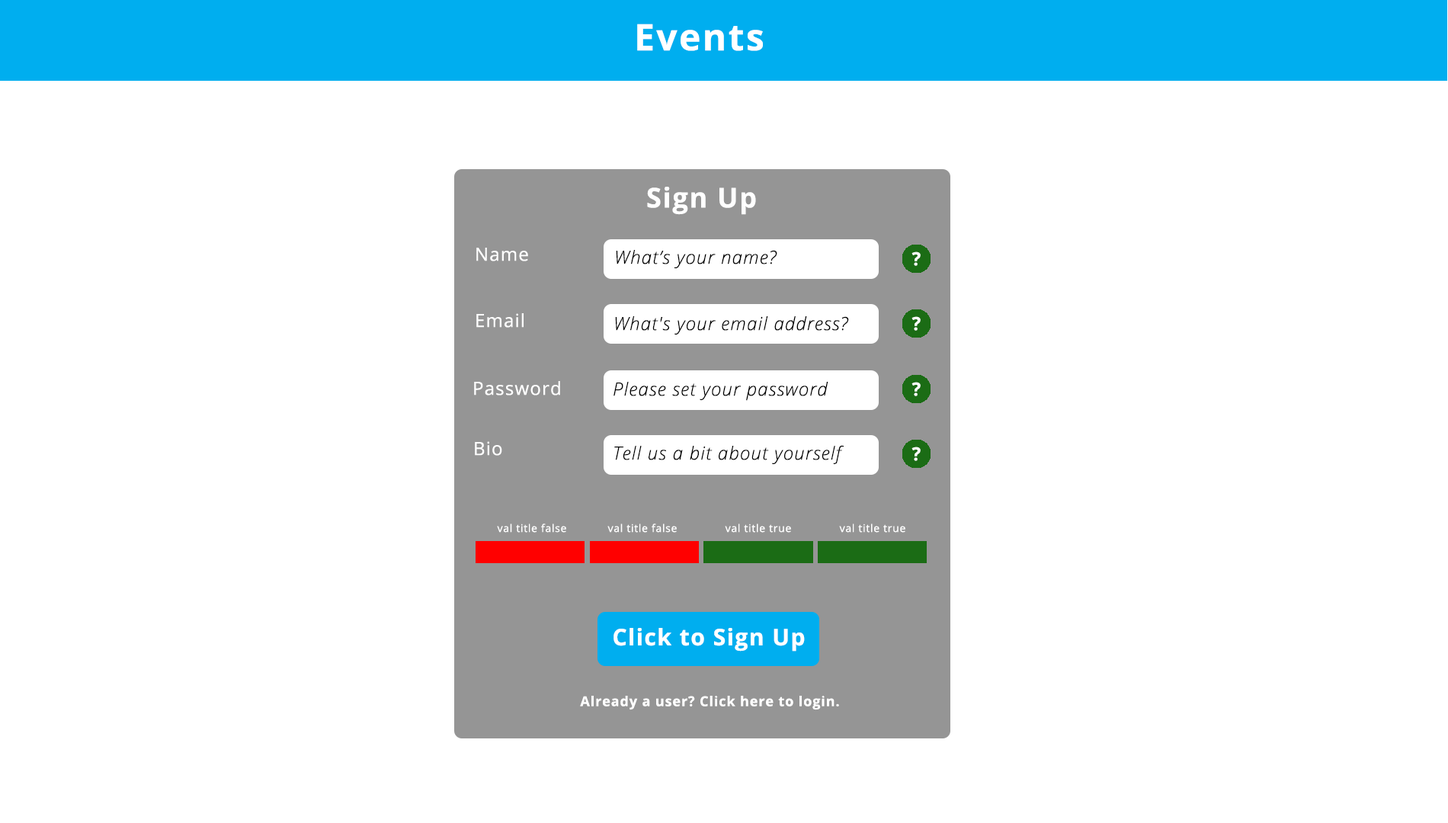
<style>
.page{position:relative;width:1448px;height:823px;background:#ffffff}
.page>*{position:absolute;margin:0}
.t1{font:36.6px "OpenSans-Bold";letter-spacing:0.05em;color:#ffffff}
.t2{font:27.4px "OpenSans-Bold";letter-spacing:0.05em;color:#ffffff}
.t3{font:18.3px "OpenSans";letter-spacing:0.05em;color:#ffffff}
.t4{font:18.3px "OpenSansLight-Italic";letter-spacing:0.05em;color:#000000}
.t5{font:10.7px "OpenSans";letter-spacing:0.05em;color:#ffffff}
.t6{font:22.9px "OpenSans-Bold";letter-spacing:0.05em;color:#ffffff}
.t7{font:13.7px "OpenSans-Bold";letter-spacing:0.05em;color:#ffffff}
</style>
<div class="page">
<p class="t1" style="left:637px;top:24px;width:126px;height:27px">Events</p>
<p class="t2" style="left:647px;top:187px;width:109px;height:28px">Sign Up</p>
<p class="t3" style="left:476px;top:248px;width:52px;height:13px">Name</p>
<p class="t4" style="left:616px;top:250px;width:162px;height:19px">What’s your name?</p>
<p class="t3" style="left:476px;top:313px;width:48px;height:15px">Email</p>
<p class="t4" style="left:615px;top:316px;width:234px;height:19px">What's your email address?</p>
<p class="t3" style="left:474px;top:381px;width:86px;height:15px">Password</p>
<p class="t4" style="left:614px;top:382px;width:215px;height:19px">Please set your password</p>
<p class="t3" style="left:475px;top:441px;width:27px;height:15px">Bio</p>
<p class="t4" style="left:614px;top:445px;width:230px;height:20px">Tell us a bit about yourself</p>
<p class="t5" style="left:497px;top:524px;width:69px;height:9px">val title false</p>
<p class="t5" style="left:608px;top:524px;width:69px;height:9px">val title false</p>
<p class="t5" style="left:725px;top:524px;width:66px;height:9px">val title true</p>
<p class="t5" style="left:839px;top:524px;width:67px;height:9px">val title true</p>
<p class="t6" style="left:614px;top:628px;width:191px;height:24px">Click to Sign Up</p>
<p class="t7" style="left:580px;top:696px;width:259px;height:14px">Already a user? Click here to login.</p>
</div>
